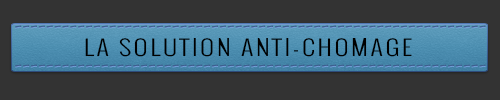
<style>
.page{position:relative;width:500px;height:100px;background:#333333}
.page>*{position:absolute;margin:0}
.t1{font:20.8px "Oswald-Light";letter-spacing:0.1em;color:#000000;scale:1.25 1}
</style>
<div class="page">
<p class="t1" style="left:85px;top:38px;width:327px;height:19px">LA SOLUTION ANTI-CHOMAGE</p>
</div>
